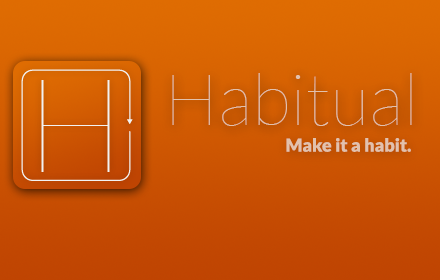
<style>
.page{position:relative;width:440px;height:280px}
.page>*{position:absolute;margin:0}
.t1{font:72px "Lato-Hairline";color:#e2c1ac}
.t2{font:18px "Lato-Black";color:#e2c1ac}
</style>
<div class="page">
<p class="t1" style="left:172px;top:73px;width:240px;height:53px">Habitual</p>
<p class="t2" style="left:286px;top:138px;width:125px;height:14px">Make it a habit.</p>
</div>
